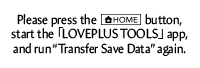
<style>
.page{position:relative;width:200px;height:68px;background:#ffffff}
.page>*{position:absolute;margin:0}
.t1{font:13.2px "Amira-Roman";color:#000000;scale:0.91 1}
.t2{font:13.2px "KozGoPr6N-Regular";color:#000000;scale:0.91 1}
</style>
<div class="page">
<p class="t1" style="left:17px;top:14px;width:165px;height:13px">Please press the                  button,</p>
<p class="t1" style="left:11px;top:27px;width:177px;height:29px;text-align:center">start the <span class="t2">「</span>LOVEPLUS TOOLS<span class="t2">」</span> app, <br>and run “Transfer Save Data” again.</p>
</div>
